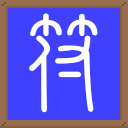
<style>
.page{position:relative;width:128px;height:128px;background:#4040ff}
.page>*{position:absolute;margin:0}
.t1{font:111.3px "DFNewChuan-Md-HKP-BF";color:#ffffff}
</style>
<div class="page">
<p class="t1" style="left:29px;top:13px;width:69px;height:100px">符</p>
</div>
